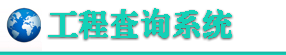
<style>
.page{position:relative;width:286px;height:55px;background:#ffffff}
.page>*{position:absolute;margin:0}
.t1{font:30px "FZXBSJW--GB1-0";color:#13d1b7;font-weight:bold}
</style>
<div class="page">
<p class="t1" style="left:48px;top:8px;width:184px;height:31px">工程查询系统</p>
</div>
